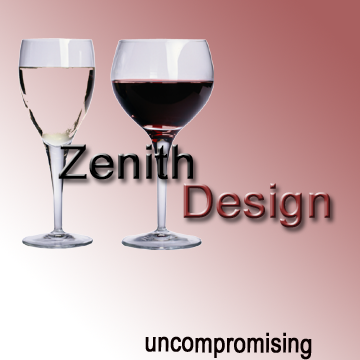
<style>
.page{position:relative;width:360px;height:360px}
.page>*{position:absolute;margin:0}
.t1{font:46.7px "ArialMT";font-weight:bold}
.t2{font:26.9px "ArialMT";color:#0a0000;font-weight:bold;scale:0.81 1}
</style>
<div class="page">
<p class="t1" style="left:58px;top:144px;width:135px;height:36px">Zenith</p>
<p class="t1" style="left:183px;top:183px;width:147px;height:45px">Design</p>
<p class="t2" style="left:145px;top:332px;width:167px;height:28px;rotate:1deg">uncompromising</p>
</div>
